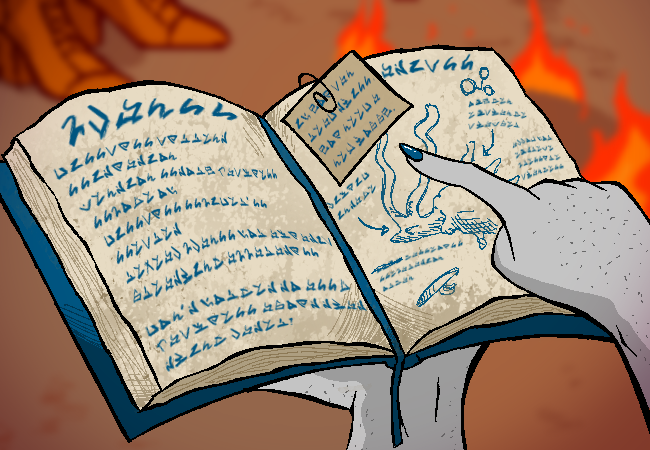
<style>
.page{position:relative;width:650px;height:450px}
.page>*{position:absolute;margin:0}
.t1{font:12.6px "AlternianBitNScratch-Rg";color:#005883;scale:0.84 1}
</style>
<div class="page">
<p class="t1" style="left:295px;top:70px;width:101px;height:98px;rotate:-45deg">If you can read thiss, you need a new hobby.</p>
</div>
